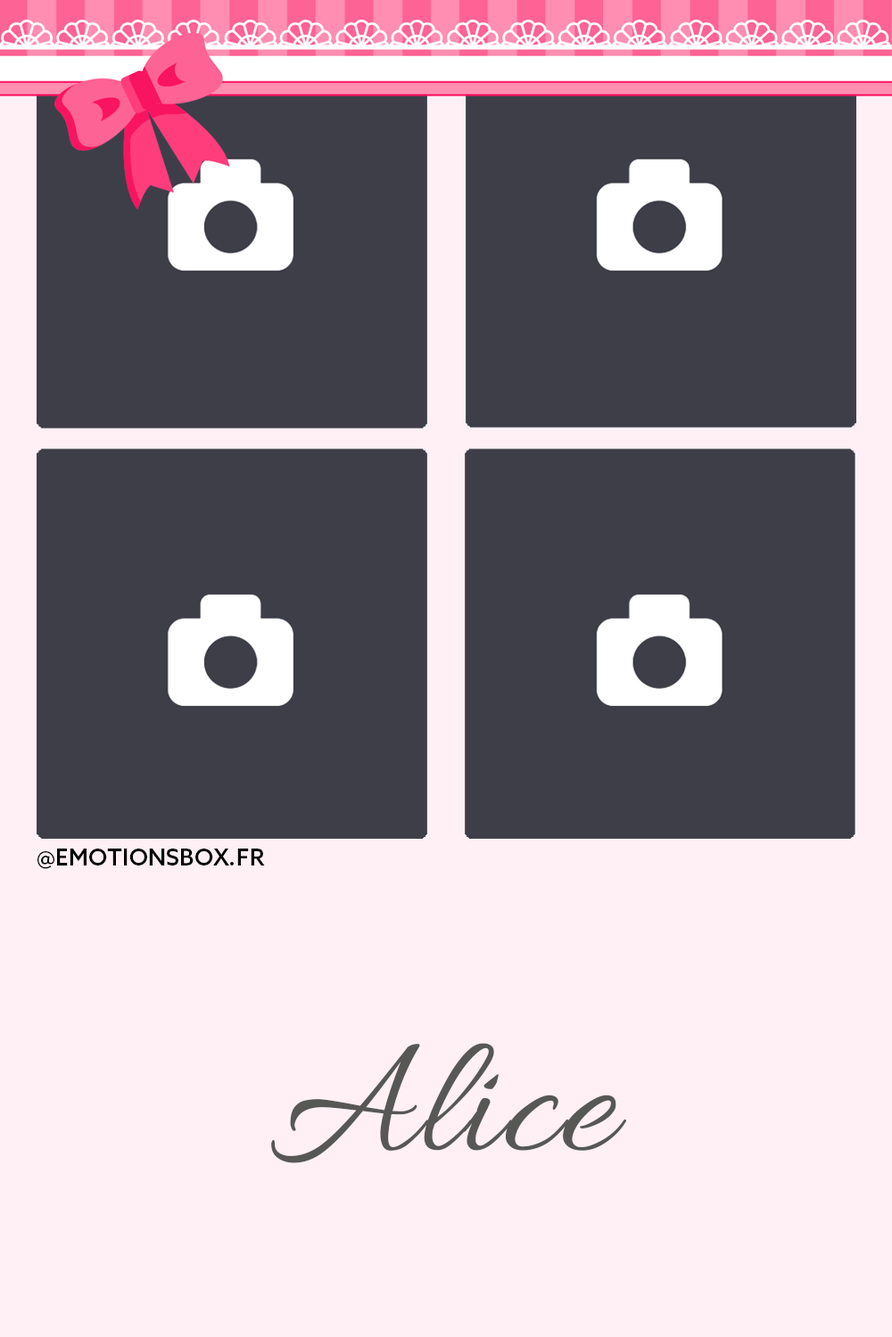
<style>
.page{position:relative;width:892px;height:1337px;background:#fff0f5}
.page>*{position:absolute;margin:0}
.t1{font:23px "AzoSans-Medium";letter-spacing:0.01em;color:#000000}
.t2{font:173.7px "Allura-Regular";letter-spacing:0.01em;color:#575756}
</style>
<div class="page">
<p class="t1" style="left:37px;top:849px;width:228px;height:20px">@EMOTIONSBOX.FR</p>
<p class="t2" style="left:271px;top:1043px;width:355px;height:121px">Alice</p>
</div>
